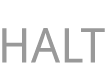
<style>
.page{position:relative;width:105px;height:83px;background:#ffffff}
.page>*{position:absolute;margin:0}
.t1{font:47.9px "DroidSans";color:#999999}
</style>
<div class="page">
<p class="t1" style="left:2px;top:28px;width:103px;height:35px">HALT</p>
</div>
